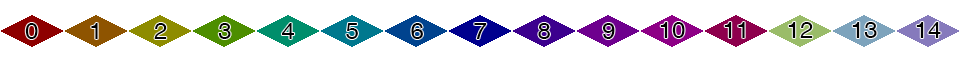
<style>
.page{position:relative;width:960px;height:64px;background:#ffffff}
.page>*{position:absolute;margin:0}
.t1{font:24px "Helvetica";color:#000000}
</style>
<div class="page">
<p class="t1" style="left:25px;top:23px;width:13px;height:16px">0</p>
<p class="t1" style="left:91px;top:23px;width:7px;height:16px">1</p>
<p class="t1" style="left:154px;top:23px;width:13px;height:16px">2</p>
<p class="t1" style="left:218px;top:23px;width:13px;height:16px">3</p>
<p class="t1" style="left:281px;top:23px;width:14px;height:16px">4</p>
<p class="t1" style="left:346px;top:23px;width:12px;height:16px">5</p>
<p class="t1" style="left:411px;top:23px;width:12px;height:16px">6</p>
<p class="t1" style="left:474px;top:23px;width:13px;height:16px">7</p>
<p class="t1" style="left:538px;top:23px;width:12px;height:16px">8</p>
<p class="t1" style="left:602px;top:23px;width:13px;height:16px">9</p>
<p class="t1" style="left:660px;top:22px;width:25px;height:16px">10</p>
<p class="t1" style="left:724px;top:22px;width:21px;height:16px">11</p>
<p class="t1" style="left:788px;top:22px;width:25px;height:16px">12</p>
<p class="t1" style="left:852px;top:22px;width:25px;height:16px">13</p>
<p class="t1" style="left:916px;top:22px;width:25px;height:16px">14</p>
</div>
